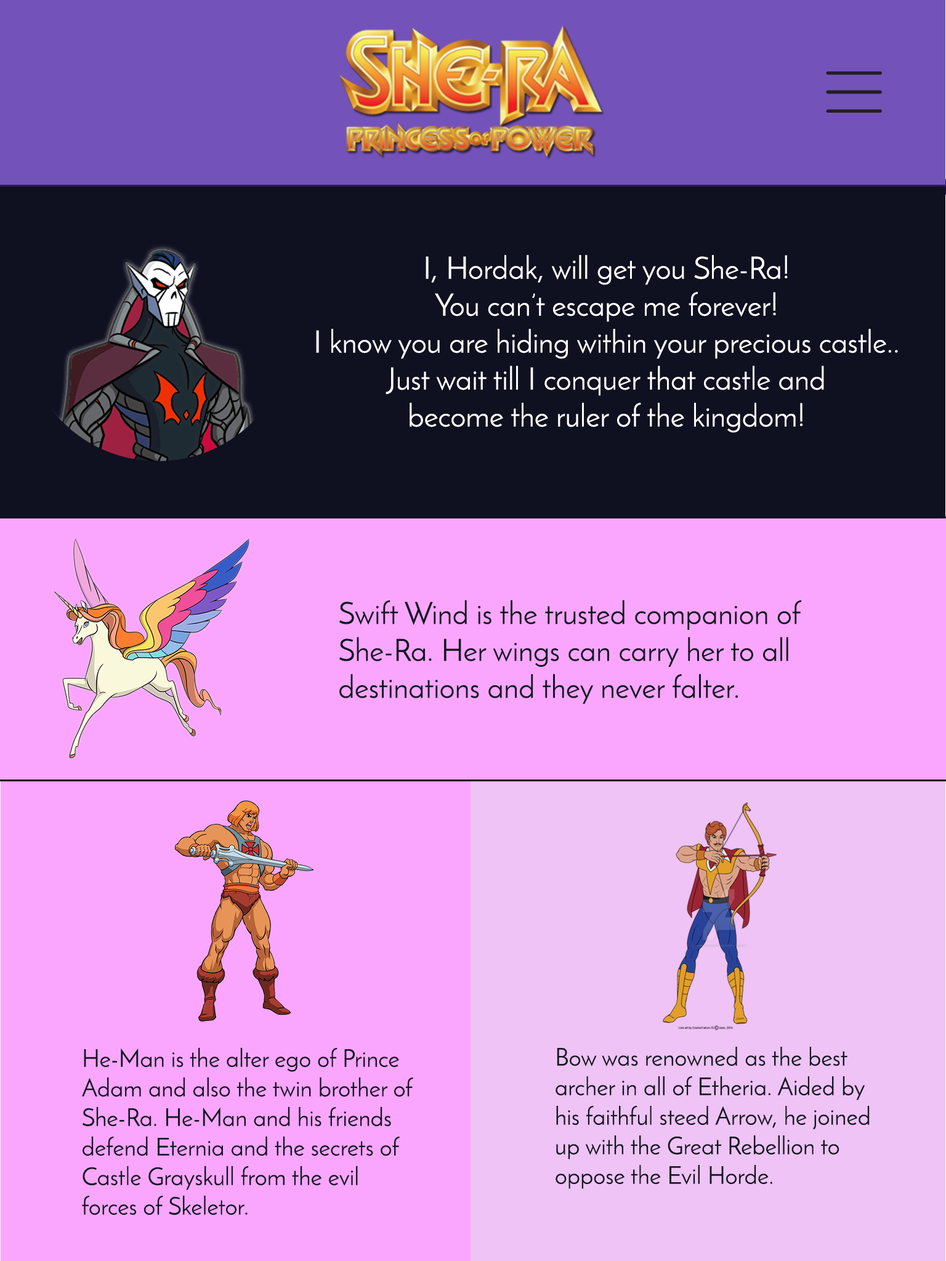
<style>
.page{position:relative;width:946px;height:1261px;background:#faa6ff}
.page>*{position:absolute;margin:0}
.t1{font:30.8px "JosefinSans";color:#ffffff}
.t2{font:30.8px "JosefinSans";color:#101820}
.t3{font:24.6px "JosefinSans";color:#101820}
</style>
<div class="page">
<p class="t1" style="left:316px;top:255px;width:582px;height:178px;text-align:center">I, Hordak, will get you She-Ra!<br>You can’t escape me forever!<br>I know you are hiding within your precious castle.. <br>Just wait till I conquer that castle and <br>become the ruler of the kingdom!</p>
<p class="t2" style="left:339px;top:600px;width:463px;height:104px">Swift Wind is the trusted companion of She-Ra. Her wings can carry her to all <br>destinations and they never falter.</p>
<p class="t3" style="left:82px;top:1047px;width:331px;height:168px">He-Man is the alter ego of Prince Adam and also the twin brother of She-Ra. He-Man and his friends defend Eternia and the secrets of Castle Grayskull from the evil forces of Skeletor.</p>
<p class="t3" style="left:555px;top:1047px;width:314px;height:142px">Bow was renowned as the best archer in all of Etheria. Aided by his faithful steed Arrow, he joined up with the Great Rebellion to oppose the Evil Horde.</p>
</div>
